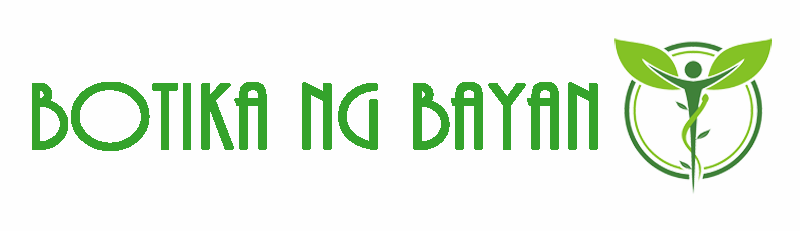
<style>
.page{position:relative;width:800px;height:231px;background:#fefefe}
.page>*{position:absolute;margin:0}
.t1{font:95.5px "ARBONNIE";color:#34a32b;font-weight:bold;scale:1.14 1}
</style>
<div class="page">
<p class="t1" style="left:32px;top:82px;width:566px;height:69px">Botika ng bayan</p>
</div>
